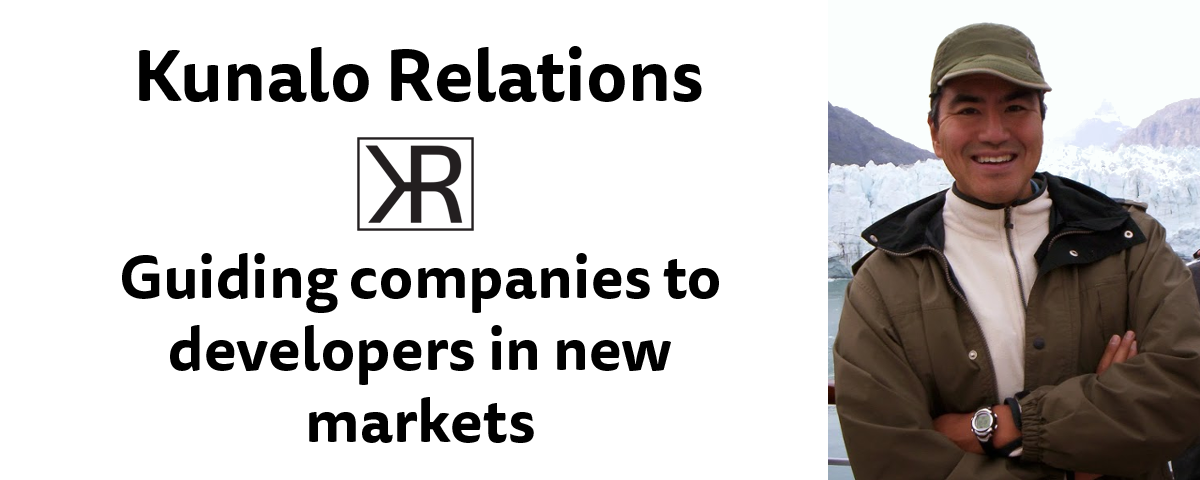
<style>
.page{position:relative;width:1200px;height:480px;background:#ffffff}
.page>*{position:absolute;margin:0}
.t1{font:72px "TisaSansPro-Bold";color:#000000}
.t2{font:60px "TisaSansPro-Bold";color:#000000}
</style>
<div class="page">
<p class="t1" style="left:139px;top:46px;width:563px;height:56px">Kunalo Relations</p>
<p class="t2" style="left:122px;top:253px;width:597px;height:190px;text-align:center">Guiding companies to <br>developers in new <br>markets</p>
</div>
